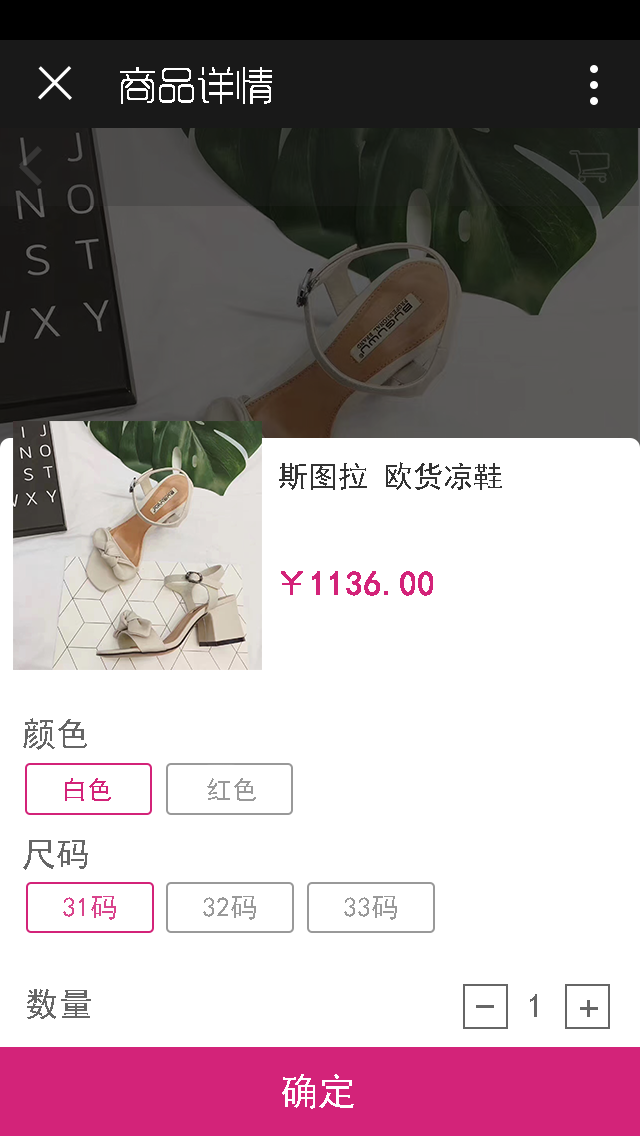
<style>
.page{position:relative;width:640px;height:1136px;background:#ffffff}
.page>*{position:absolute;margin:0}
.t1{font:38px "RTWSYueGoG0v1-ExLight";color:#ffffff;font-weight:bold}
.t2{font:30px "SimHei";color:#333333}
.t3{font:34px "SimHei";color:#d32379;font-weight:bold}
.t4{font:34px "SimHei";color:#666666}
.t5{font:28px "SimHei";color:#d9448c}
.t6{font:28px "SimHei";color:#999999}
.t7{font:40px "SimHei";color:#666666}
.t8{font:38px "SimHei";color:#ffffff}
</style>
<div class="page">
<p class="t1" style="left:120px;top:67px;width:152px;height:37px">商品详情</p>
<p class="t2" style="left:279px;top:462px;width:223px;height:28px">斯图拉 欧货凉鞋</p>
<p class="t3" style="left:281px;top:571px;width:152px;height:25px">￥1136.00</p>
<p class="t4" style="left:23px;top:718px;width:64px;height:32px">颜色</p>
<p class="t4" style="left:23px;top:840px;width:65px;height:30px">尺码</p>
<p class="t5" style="left:63px;top:896px;width:53px;height:24px">31码</p>
<p class="t6" style="left:203px;top:896px;width:53px;height:24px">32码</p>
<p class="t6" style="left:344px;top:896px;width:53px;height:24px">33码</p>
<p class="t4" style="left:27px;top:989px;width:64px;height:30px">数量</p>
<p class="t4" style="left:530px;top:994px;width:7px;height:23px">1</p>
<p class="t7" style="left:580px;top:1000px;width:18px;height:17px">+</p>
<p class="t8" style="left:282px;top:1074px;width:72px;height:35px">确定</p>
</div>
